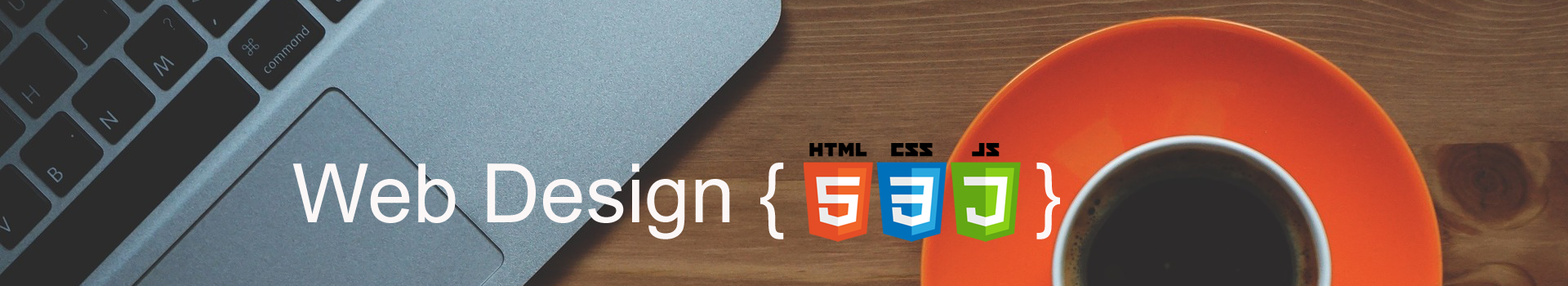
<style>
.page{position:relative;width:1568px;height:286px}
.page>*{position:absolute;margin:0}
.t1{font:81.7px "ArialMT";color:#fcf7f7}
</style>
<div class="page">
<p class="t1" style="left:292px;top:163px;width:768px;height:76px">Web Design {           }</p>
</div>
